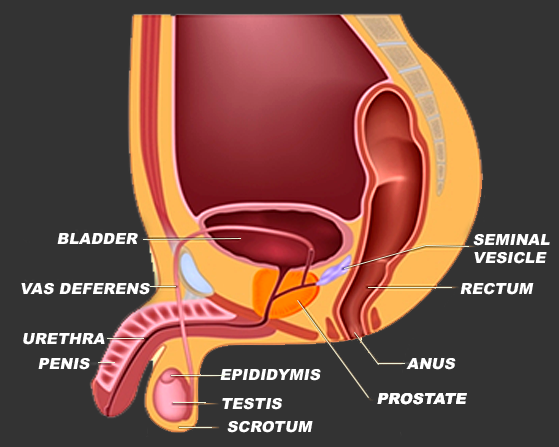
<style>
.page{position:relative;width:559px;height:447px;background:#333333}
.page>*{position:absolute;margin:0}
.t1{font:15.3px "Arial-Black";color:#ffffff;font-style:italic}
</style>
<div class="page">
<p class="t1" style="left:57px;top:233px;width:81px;height:11px">BLADDER</p>
<p class="t1" style="left:473px;top:234px;width:77px;height:30px">SEMINAL<br>VESICLE</p>
<p class="t1" style="left:21px;top:283px;width:129px;height:12px">VAS DEFERENS</p>
<p class="t1" style="left:460px;top:283px;width:74px;height:12px">RECTUM</p>
<p class="t1" style="left:23px;top:333px;width:82px;height:12px">URETHRA</p>
<p class="t1" style="left:38px;top:358px;width:52px;height:12px">PENIS</p>
<p class="t1" style="left:406px;top:358px;width:50px;height:12px">ANUS</p>
<p class="t1" style="left:220px;top:369px;width:101px;height:12px">EPIDIDYMIS</p>
<p class="t1" style="left:222px;top:398px;width:60px;height:12px">TESTIS</p>
<p class="t1" style="left:377px;top:393px;width:90px;height:12px">PROSTATE</p>
<p class="t1" style="left:377px;top:393px;width:90px;height:12px">PROSTATE</p>
<p class="t1" style="left:227px;top:421px;width:86px;height:12px">SCROTUM</p>
</div>
